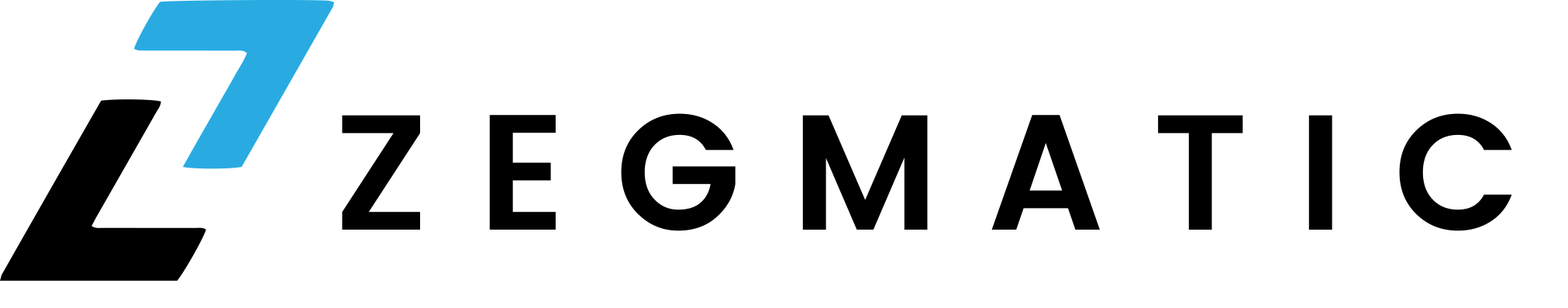
<style>
.page{position:relative;width:1568px;height:308px;background:#ffffff}
.page>*{position:absolute;margin:0}
.t1{font:163.4px "Poppins-SemiBold";letter-spacing:0.3em;color:#000000}
</style>
<div class="page">
<p class="t1" style="left:342px;top:113px;width:1170px;height:118px">ZEGMATIC</p>
</div>
